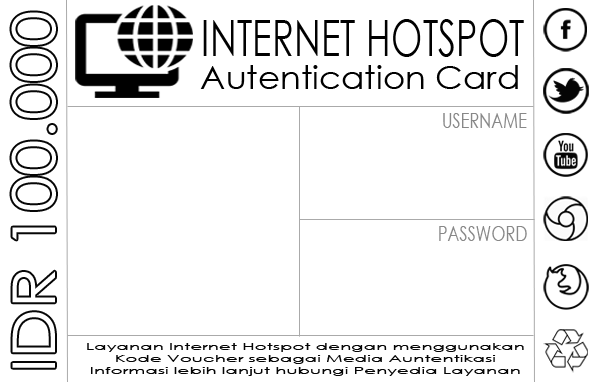
<style>
.page{position:relative;width:600px;height:382px;background:#ffffff}
.page>*{position:absolute;margin:0}
.t1{font:49.8px "CenturyGothic";color:#000000;scale:0.73 1}
.t2{font:31.6px "CenturyGothic";color:#000000;scale:1.08 1}
.t3{font:20.8px "CenturyGothic";color:#888888;scale:0.78 1}
.t4{font:10.2px "CenturyGothic";color:#050505;scale:1.79 1}
</style>
<div class="page">
<p class="t1" style="left:203px;top:19px;width:321px;height:38px">INTERNET HOTSPOT</p>
<p class="t2" style="left:200px;top:65px;width:318px;height:24px">Autentication Card</p>
<p class="t3" style="left:443px;top:113px;width:84px;height:15px">USERNAME</p>
<p class="t3" style="left:439px;top:226px;width:88px;height:15px">PASSWORD</p>
<p class="t4" style="left:87px;top:343px;width:437px;height:33px;text-align:center">Layanan Internet Hotspot dengan menggunakan<br>Kode Voucher sebagai Media Auntentikasi<br>Informasi lebih lanjut hubungi Penyedia Layanan</p>
</div>
